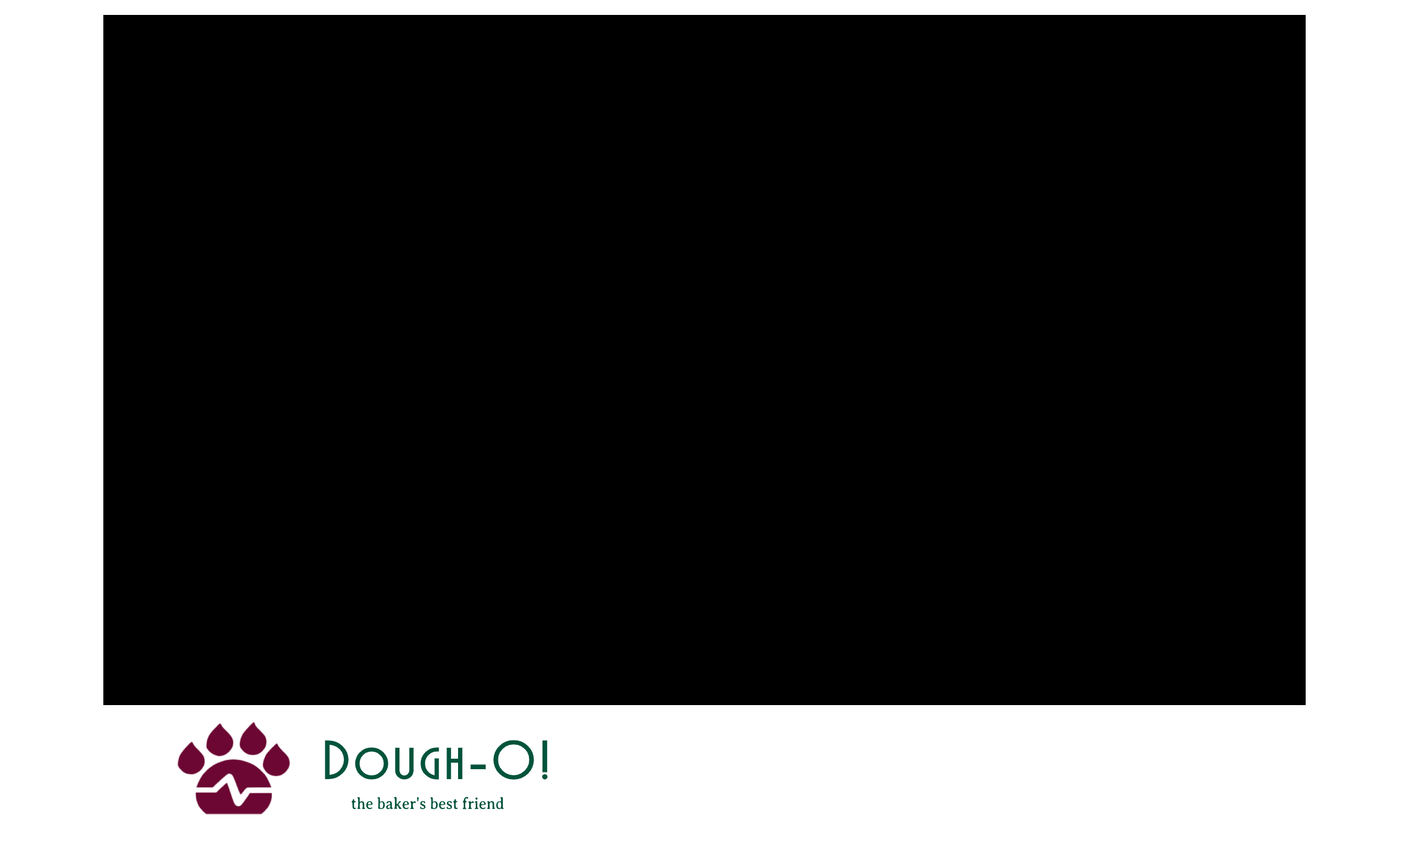
<style>
.page{position:relative;width:1409px;height:846px;background:#000000}
.page>*{position:absolute;margin:0}
.t1{font:55.3px "MarquisetteBTNBold";letter-spacing:0.075em;color:#01533b}
.t2{font:16.6px "AveriaSerifLibre-Regular";color:#01533b;scale:0.91 1}
</style>
<div class="page">
<p class="t1" style="left:325px;top:740px;width:223px;height:40px">Dough-O!</p>
<p class="t2" style="left:351px;top:797px;width:153px;height:13px">the baker's best friend</p>
</div>
